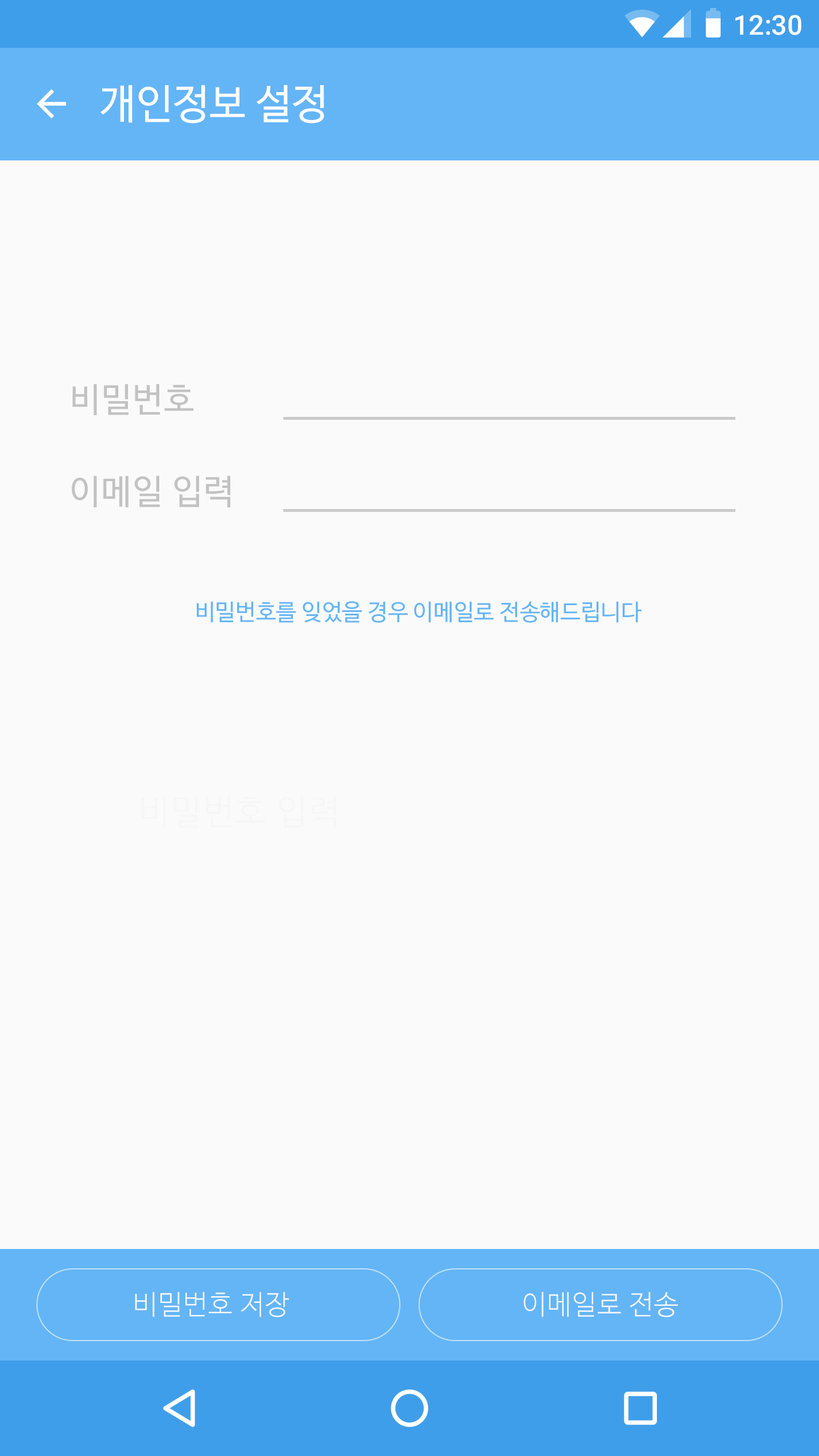
<style>
.page{position:relative;width:819px;height:1456px;background:#fafafa}
.page>*{position:absolute;margin:0}
.t1{font:27.3px "Roboto-Medium";color:#ffffff}
.t2{font:40.9px "NanumBarunGothic";color:#ffffff}
.t3{font:34.1px "NanumBarunGothic";letter-spacing:0.025em;color:#c2c2c2}
.t4{font:34.4px "NanumBarunGothic";letter-spacing:0.025em;color:#c2c2c2}
.t5{font:22.7px "NanumBarunGothic";color:#64b5f6}
.t6{font:27.3px "NanumBarunGothicLight";letter-spacing:0.025em;color:#fafafa}
</style>
<div class="page">
<p class="t1" style="left:735px;top:15px;width:66px;height:20px">12:30</p>
<p class="t2" style="left:100px;top:85px;width:224px;height:38px">개인정보 설정</p>
<p class="t3" style="left:72px;top:384px;width:121px;height:31px">비밀번호</p>
<p class="t4" style="left:72px;top:475px;width:158px;height:33px">이메일 입력</p>
<p class="t5" style="left:197px;top:601px;width:445px;height:22px">비밀번호를 잊었을 경우 이메일로 전송해드립니다</p>
<p class="t6" style="left:135px;top:1292px;width:154px;height:25px">비밀번호 저장</p>
<p class="t6" style="left:524px;top:1292px;width:154px;height:25px">이메일로 전송</p>
</div>
